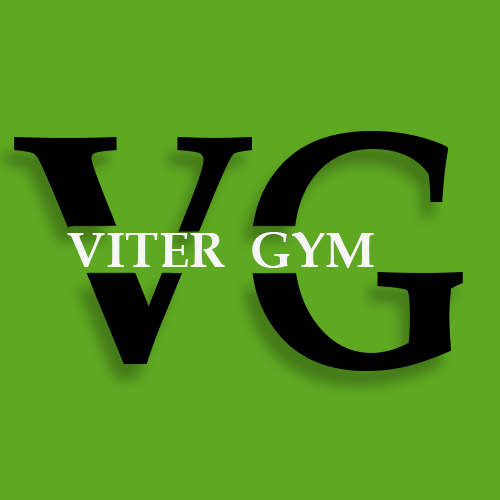
<style>
.page{position:relative;width:500px;height:500px;background:#5ea822}
.page>*{position:absolute;margin:0}
.t1{font:50px "BookAntiqua-Bold";color:#f6f6f6}
</style>
<div class="page">
<p class="t1" style="left:67px;top:233px;width:158px;height:34px">VITER</p>
<p class="t1" style="left:252px;top:232px;width:122px;height:36px">GYM</p>
</div>
